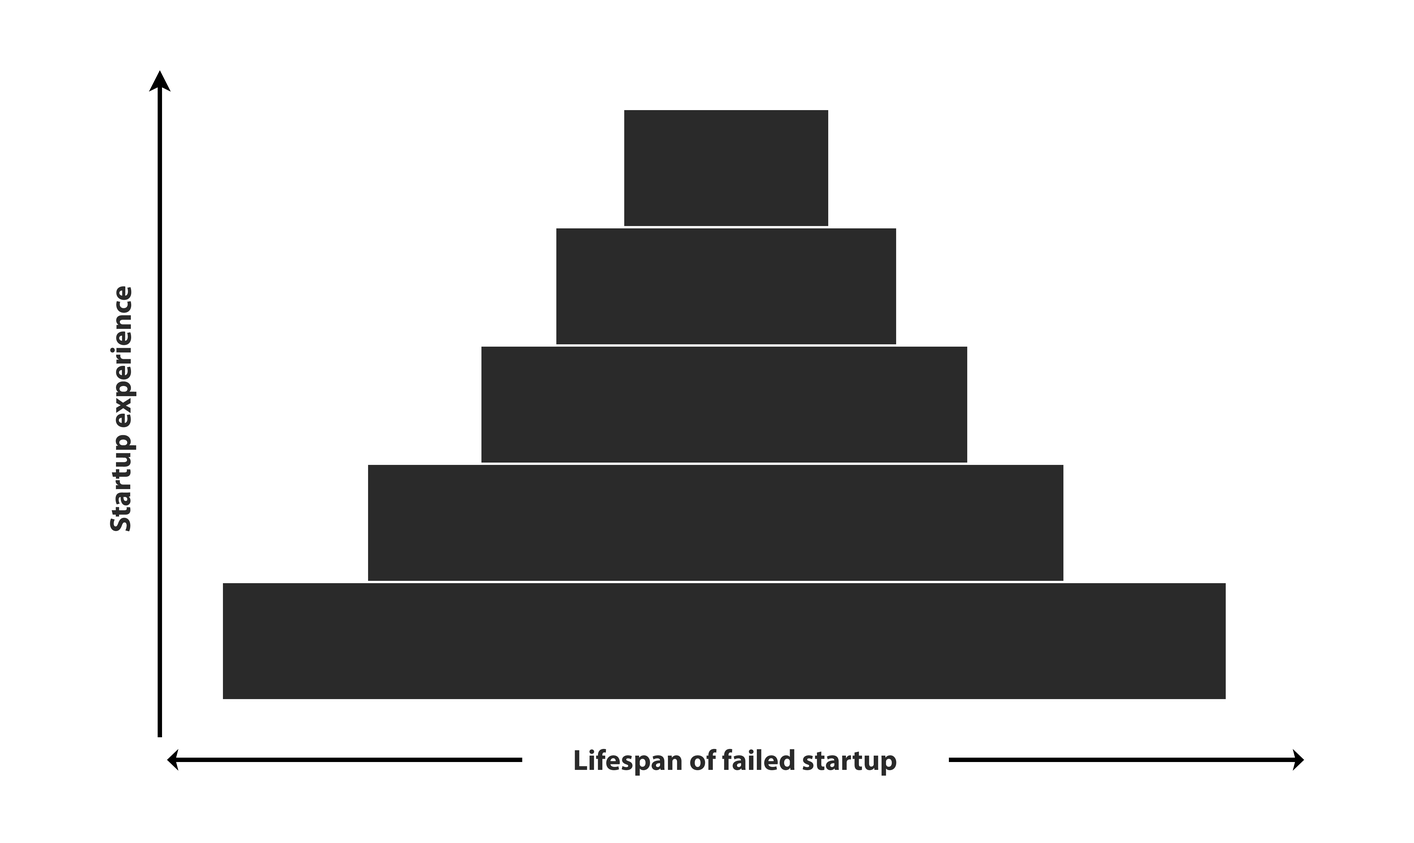
<style>
.page{position:relative;width:1414px;height:843px;background:#ffffff}
.page>*{position:absolute;margin:0}
.t1{font:29.1px "MyriadPro-Bold";color:#2a2a2a}
</style>
<div class="page">
<p class="t1" style="left:110px;top:286px;width:26px;height:246px;rotate:-90deg">Startup experience</p>
<p class="t1" style="left:575px;top:749px;width:321px;height:27px">Lifespan of failed startup</p>
</div>
